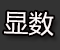
<style>
.page{position:relative;width:60px;height:50px;background:#333333}
.page>*{position:absolute;margin:0}
.t1{font:24.6px "MicrosoftYaHei";color:#fffafa}
</style>
<div class="page">
<p class="t1" style="left:4px;top:11px;width:50px;height:25px;rotate:2deg">显数</p>
</div>
